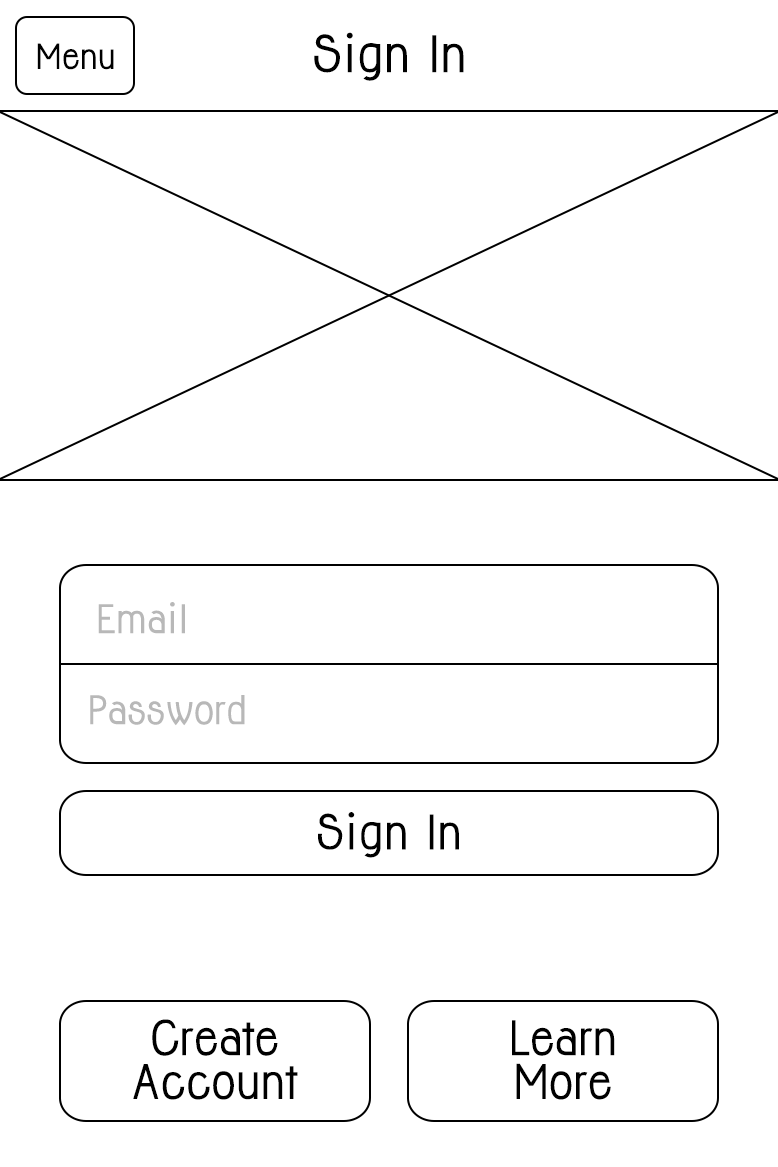
<style>
.page{position:relative;width:778px;height:1167px;background:#ffffff}
.page>*{position:absolute;margin:0}
.t1{font:46.2px "Jolly-Bold";color:#000000}
.t2{font:32px "Jolly-Bold";color:#000000}
.t3{font:36.5px "Jolly-Bold";color:#b8b8b8}
.t4{font:43.7px "Jolly-Bold";color:#000000}
.t5{font:43.9px/43.9px "Jolly-Bold";color:#000000}
</style>
<div class="page">
<p class="t1" style="left:314px;top:32px;width:150px;height:49px">Sign In</p>
<p class="t2" style="left:37px;top:43px;width:77px;height:27px">Menu</p>
<p class="t3" style="left:98px;top:602px;width:87px;height:32px">Email</p>
<p class="t3" style="left:90px;top:695px;width:155px;height:31px">Password</p>
<p class="t4" style="left:318px;top:812px;width:141px;height:46px">Sign In</p>
<p class="t5" style="left:133px;top:1019px;width:165px;height:81px;text-align:center">Create<br>Account</p>
<p class="t5" style="left:512px;top:1020px;width:103px;height:80px;text-align:center">Learn<br>More</p>
</div>
